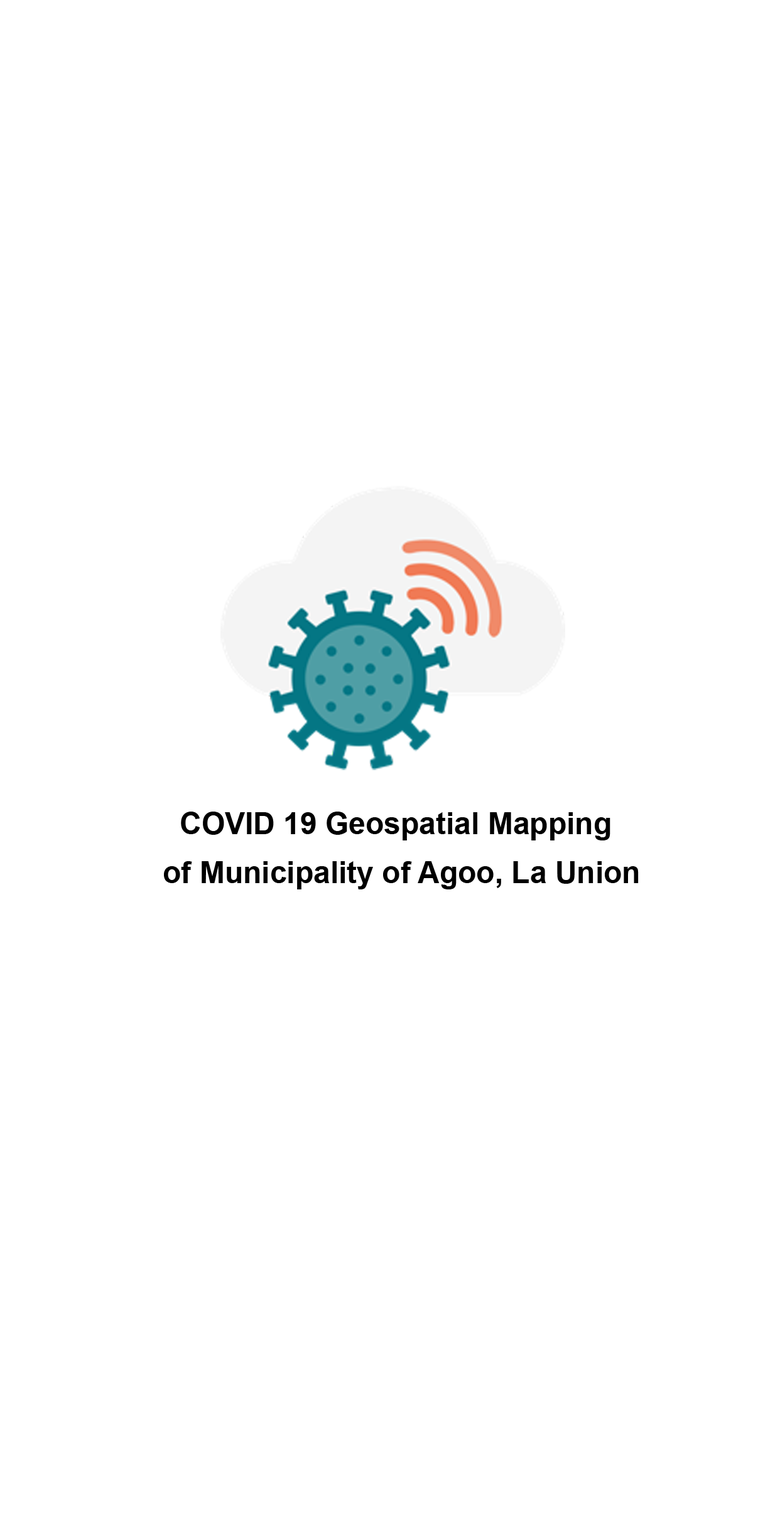
<style>
.page{position:relative;width:780px;height:1529px;background:#ffffff}
.page>*{position:absolute;margin:0}
.t1{font:30.1px "Arial-BoldMT";color:#000000}
</style>
<div class="page">
<p class="t1" style="left:181px;top:812px;width:429px;height:29px">COVID 19 Geospatial Mapping</p>
<p class="t1" style="left:164px;top:861px;width:474px;height:29px">of Municipality of Agoo, La Union</p>
</div>
